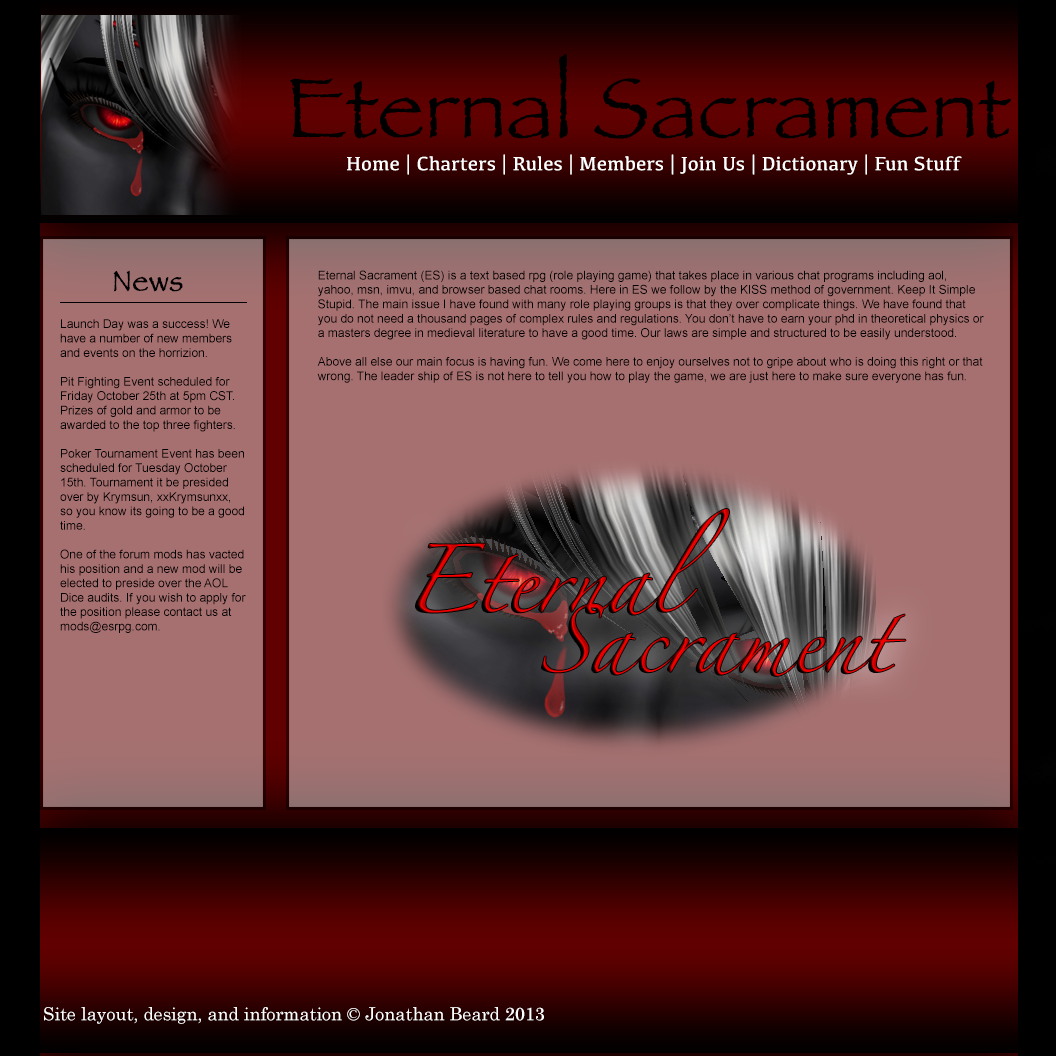
<style>
.page{position:relative;width:1056px;height:1056px;background:#a67070}
.page>*{position:absolute;margin:0}
.t1{font:88.2px "Papyrus";color:#000000}
.t2{font:20px "Kefa-Regular";color:#ffffff;scale:1.03 1}
.t3{font:30px "Papyrus";color:#000000;font-weight:bold}
.t4{font:12px "ArialMT";color:#000000}
.t5{font:18px "Century";color:#ffffff}
</style>
<div class="page">
<p class="t1" style="left:290px;top:54px;width:721px;height:85px">Eternal Sacrament</p>
<p class="t2" style="left:347px;top:154px;width:615px;height:21px">Home | Charters | Rules | Members | Join Us | Dictionary | Fun Stuff</p>
<p class="t3" style="left:113px;top:270px;width:70px;height:22px">News</p>
<p class="t4" style="left:317px;top:270px;width:667px;height:113px">Eternal Sacrament (ES) is a text based rpg (role playing game) that takes place in various chat programs including aol, yahoo, msn, imvu, and browser based chat rooms. Here in ES we follow by the KISS method of government. Keep It Simple Stupid. The main issue I have found with many role playing groups is that they over complicate things. We have found that you do not need a thousand pages of complex rules and regulations. You don’t have to earn your phd in theoretical physics or a masters degree in medieval literature to have a good time. Our laws are simple and structured to be easily understood.<br><br>Above all else our main focus is having fun. We come here to enjoy ourselves not to gripe about who is doing this right or that wrong. The leader ship of ES is not here to tell you how to play the game, we are just here to make sure everyone has fun.</p>
<p class="t4" style="left:60px;top:319px;width:186px;height:314px">Launch Day was a success! We have a number of new members and events on the horrizion. <br><br>Pit Fighting Event scheduled for Friday October 25th at 5pm CST. Prizes of gold and armor to be awarded to the top three fighters.<br><br>Poker Tournament Event has been scheduled for Tuesday October 15th. Tournament it be presided over by Krymsun, xxKrymsunxx, so you know its going to be a good time.<br><br>One of the forum mods has vacted his position and a new mod will be elected to preside over the AOL Dice audits. If you wish to apply for the position please contact us at mods@esrpg.com.</p>
<p class="t5" style="left:44px;top:1007px;width:500px;height:17px">Site layout, design, and information © Jonathan Beard 2013</p>
</div>
